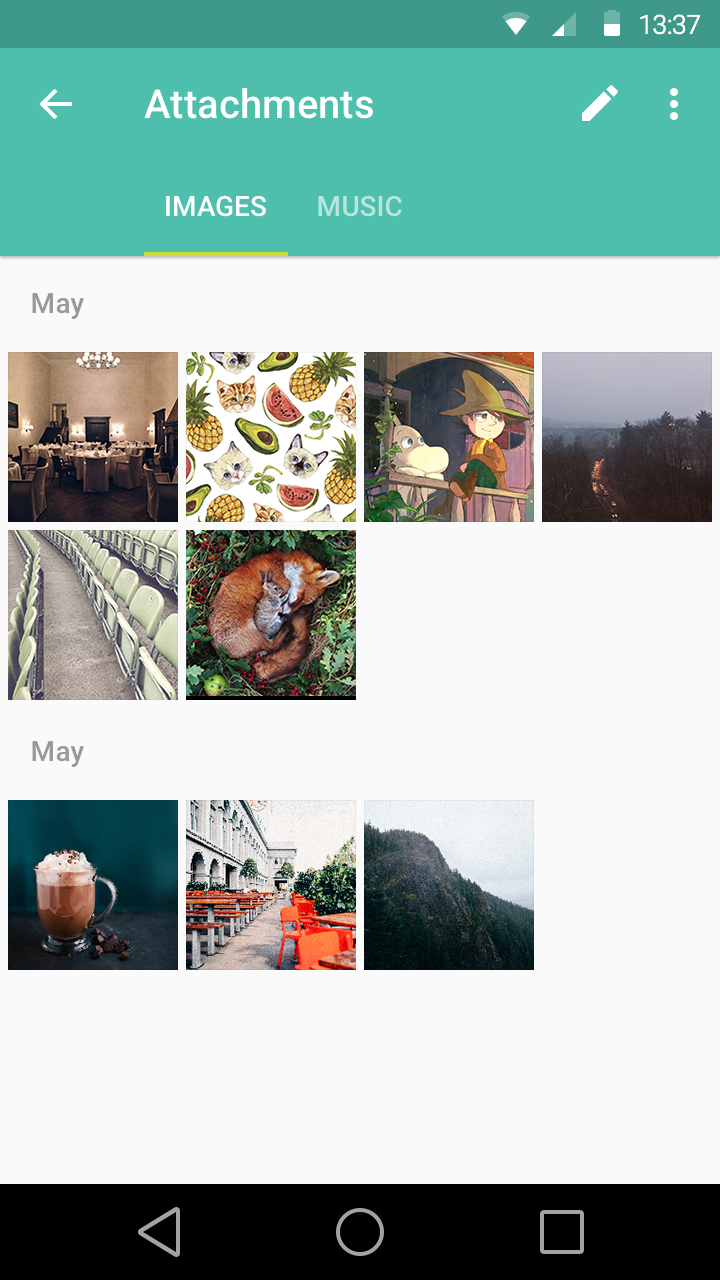
<style>
.page{position:relative;width:720px;height:1280px;background:#fafafa}
.page>*{position:absolute;margin:0}
.t1{font:26.1px "Roboto-Light";color:#ffffff}
.t2{font:40px "Roboto-Medium";color:#ffffff}
.t3{font:28px "Roboto-Medium";color:#ffffff;text-transform:uppercase}
.t4{font:28px "Roboto-Medium";color:#b8e5de;text-transform:uppercase}
.t5{font:28px "Roboto-Medium";color:#999999}
</style>
<div class="page">
<p class="t1" style="left:640px;top:14px;width:60px;height:21px">13:37</p>
<p class="t2" style="left:144px;top:88px;width:229px;height:31px">Attachments</p>
<p class="t3" style="left:166px;top:195px;width:100px;height:22px">Images</p>
<p class="t4" style="left:318px;top:195px;width:84px;height:22px">Music</p>
<p class="t5" style="left:32px;top:293px;width:52px;height:26px">May</p>
<p class="t5" style="left:32px;top:741px;width:52px;height:26px">May</p>
</div>
